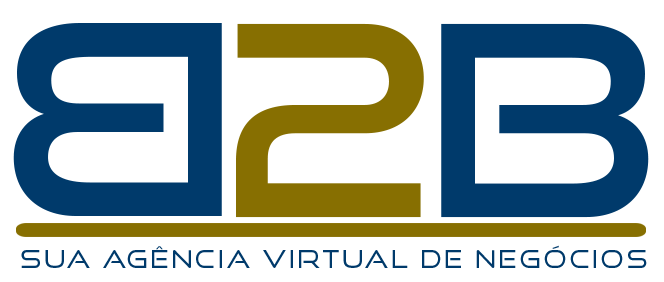
<style>
.page{position:relative;width:664px;height:282px;background:#ffffff}
.page>*{position:absolute;margin:0}
.t1{font:191.6px "GoodTimes";letter-spacing:-0.048em;color:#003a6b}
.t2{font:190.8px "GoodTimes";letter-spacing:-0.048em;color:#876f01}
.t3{font:190.8px "GoodTimes";letter-spacing:-0.048em;color:#003a6b}
.t4{font:17.3px "GoodTimesBook";letter-spacing:0.113em;color:#003a6b}
</style>
<div class="page">
<p class="t1" style="left:13px;top:23px;width:209px;height:193px;rotate:180deg">B</p>
<p class="t2" style="left:236px;top:23px;width:413px;height:195px">2<span class="t3">B</span></p>
<p class="t4" style="left:21px;top:245px;width:626px;height:23px">SUA AGÊNCIA VIRTUAL DE NEGÓCIOS</p>
</div>
